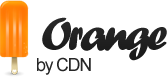
<style>
.page{position:relative;width:167px;height:77px;background:#ffffff}
.page>*{position:absolute;margin:0}
.t1{font:48px "ForteMT";letter-spacing:-0.075em;color:#202020}
.t2{font:18px "ArialMT";letter-spacing:-0.075em;color:#272727}
</style>
<div class="page">
<p class="t1" style="left:42px;top:17px;width:125px;height:44px">Orange</p>
<p class="t2" style="left:37px;top:57px;width:54px;height:18px">by CDN</p>
</div>
